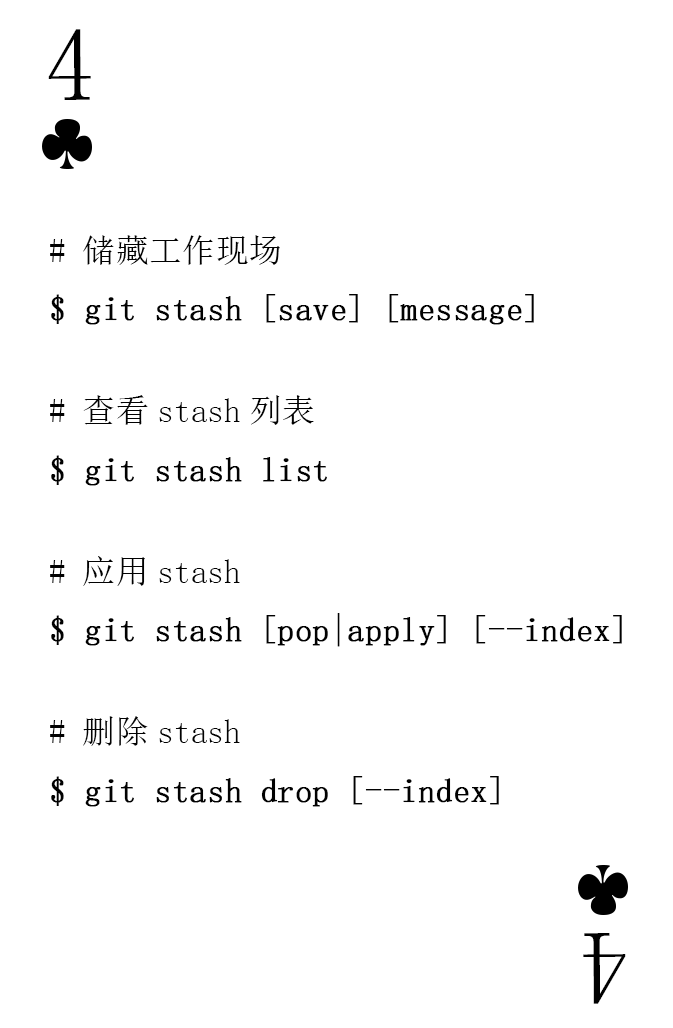
<style>
.page{position:relative;width:673px;height:1028px;background:#ffffff}
.page>*{position:absolute;margin:0}
.t1{font:104.2px "SimSun-ExtB";color:#010101;scale:0.93 1}
.t2{font:33.3px "SimSun";color:#010101;font-weight:bold}
.t3{font:33.3px "SimSun";color:#010101}
</style>
<div class="page">
<p class="t1" style="left:48px;top:29px;width:43px;height:71px">4</p>
<p class="t2" style="left:50px;top:235px;width:572px;height:572px"><span class="t3"># 储藏工作现场<br></span>$ git stash [save] [message]<br> <br><br><span class="t3"># 查看stash列表<br></span>$ git stash list<br> <br><span class="t3"># 应用stash<br></span>$ git stash [pop|apply] [--index]<br> <br><span class="t3"># 删除stash<br></span>$ git stash drop [--index]</p>
<p class="t1" style="left:583px;top:933px;width:43px;height:71px;rotate:180deg">4</p>
</div>
